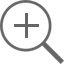
<style>
.page{position:relative;width:64px;height:64px;background:#ffffff}
.page>*{position:absolute;margin:0}
.t1{font:48px "Avenir-Roman";color:#666666}
</style>
<div class="page">
<p class="t1" style="left:14px;top:13px;width:25px;height:25px">+</p>
</div>
